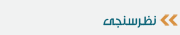
<style>
.page{position:relative;width:180px;height:35px;background:#f1f2f2}
.page>*{position:absolute;margin:0}
.t1{font:14px "Mj_Flow";letter-spacing:-0.001em;color:#0d6579}
</style>
<div class="page">
<p class="t1" style="left:103px;top:15px;width:53px;height:13px">نظـرسنجی</p>
</div>
